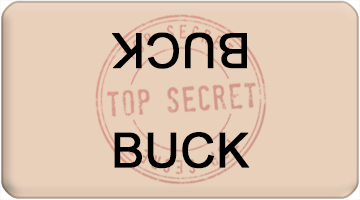
<style>
.page{position:relative;width:360px;height:200px;background:#e8d0bb}
.page>*{position:absolute;margin:0}
.t1{font:48px "ArialMT";color:#000000;font-weight:bold}
</style>
<div class="page">
<p class="t1" style="left:112px;top:32px;width:135px;height:37px;rotate:180deg">BUCK</p>
<p class="t1" style="left:114px;top:132px;width:136px;height:37px">BUCK</p>
</div>
